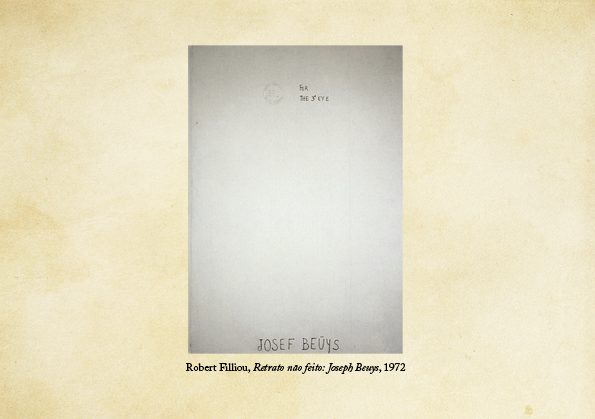
<style>
.page{position:relative;width:595px;height:419px}
.page>*{position:absolute;margin:0}
.t1{font:11px "ACaslonPro-Italic";color:#000000}
.t2{font:11px "ACaslonPro-Regular";color:#000000}
</style>
<div class="page">
<p class="t1" style="left:186px;top:363px;width:220px;height:11px"><span class="t2">Robert Filliou, </span>Retrato não feito: Joseph Beuys<span class="t2">, 1972</span></p>
</div>
